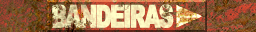
<style>
.page{position:relative;width:256px;height:32px}
.page>*{position:absolute;margin:0}
.t1{font:30.7px "Arial-Black";letter-spacing:-0.1em;color:#f7edb9;text-transform:uppercase;font-weight:bold;scale:0.67 1}
</style>
<div class="page">
<p class="t1" style="left:52px;top:4px;width:122px;height:24px">bandeiras</p>
</div>
